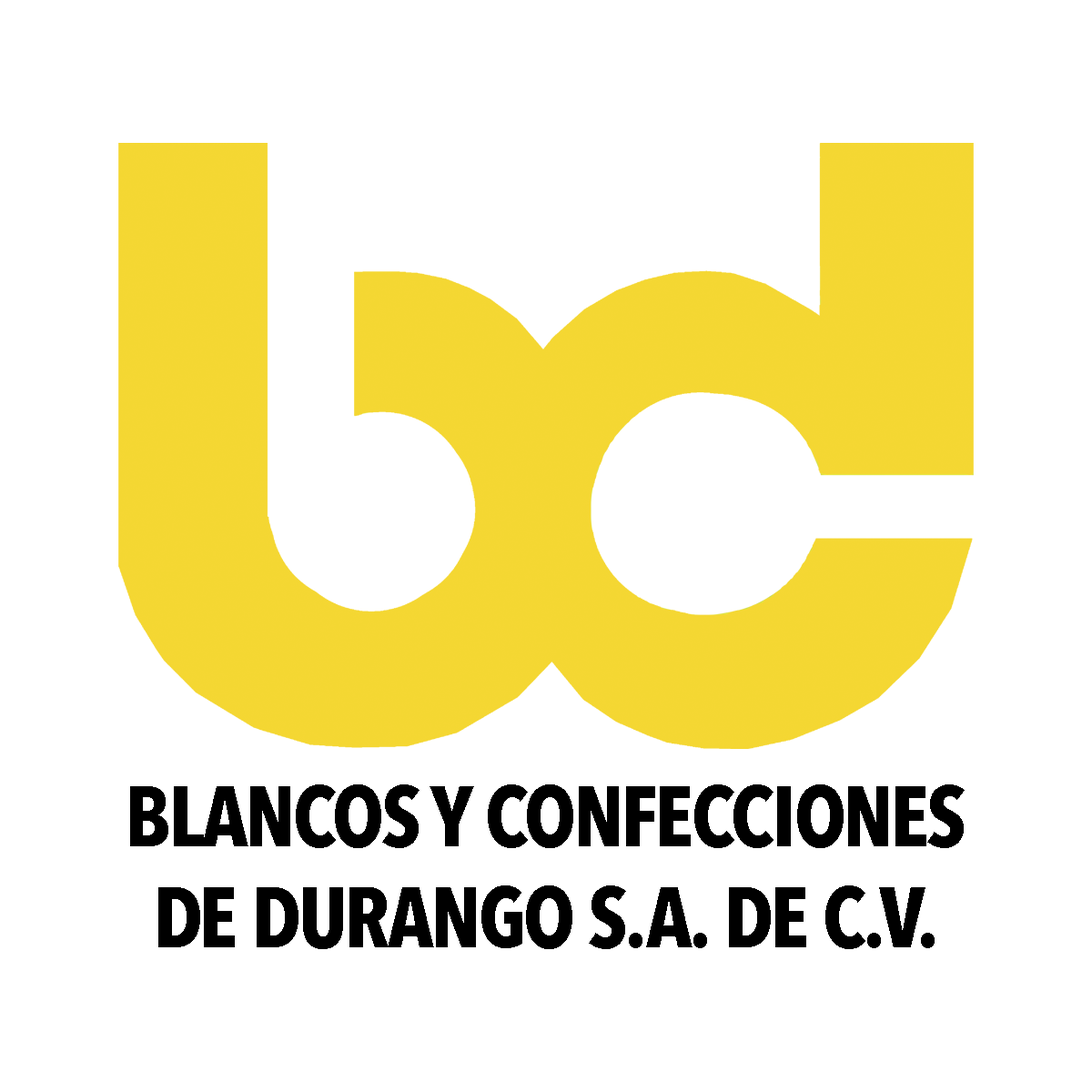
<style>
.page{position:relative;width:1092px;height:1092px;background:#ffffff}
.page>*{position:absolute;margin:0}
.t1{font:84.4px "AvenirNextCondensed-Bold";color:#000000}
</style>
<div class="page">
<p class="t1" style="left:130px;top:784px;width:835px;height:165px;text-align:center">BLANCOS Y CONFECCIONES<br>DE DURANGO S.A. DE C.V.</p>
</div>
